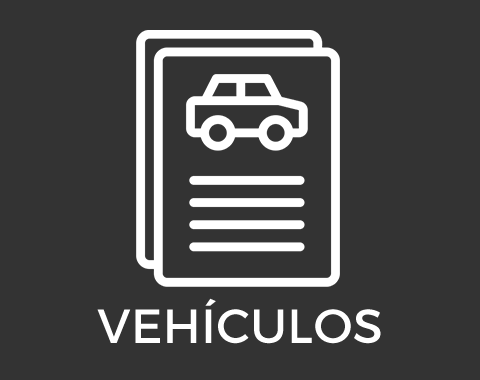
<style>
.page{position:relative;width:480px;height:380px;background:#333333}
.page>*{position:absolute;margin:0}
.t1{font:48px "Montserrat-Regular";letter-spacing:0.01em;color:#ffffff}
</style>
<div class="page">
<p class="t1" style="left:97px;top:298px;width:284px;height:46px">VEHÍCULOS</p>
</div>
